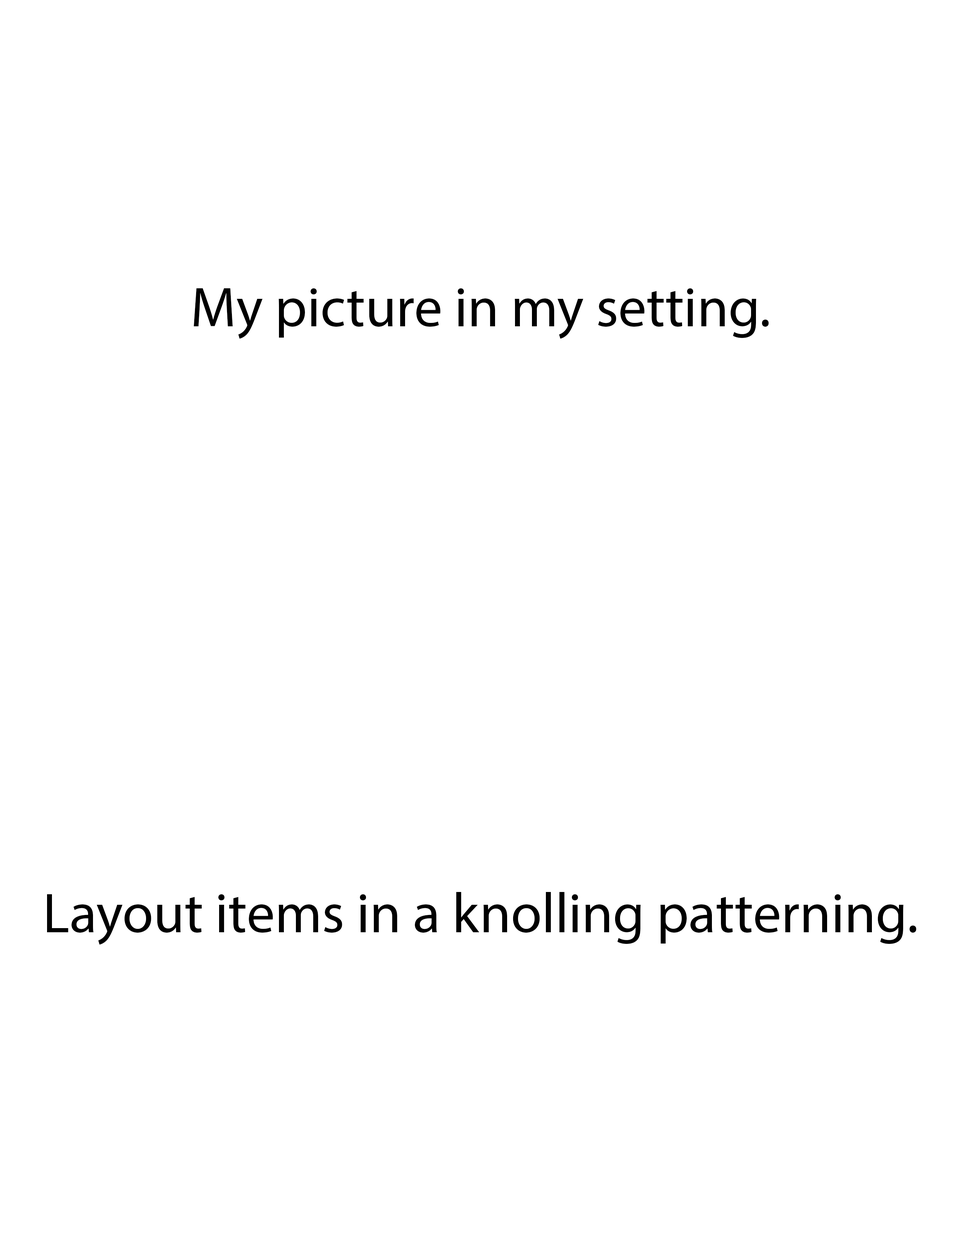
<style>
.page{position:relative;width:960px;height:1242px;background:#ffffff}
.page>*{position:absolute;margin:0}
.t1{font:56.5px "MyriadPro-Regular";color:#000000}
</style>
<div class="page">
<p class="t1" style="left:193px;top:288px;width:576px;height:51px">My picture in my setting.</p>
<p class="t1" style="left:47px;top:892px;width:869px;height:53px">Layout items in a knolling patterning.</p>
</div>
